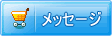
<style>
.page{position:relative;width:112px;height:36px}
.page>*{position:absolute;margin:0}
.t1{font:16px "MS-UIGothic";color:#fefefe}
</style>
<div class="page">
<p class="t1" style="left:42px;top:12px;width:59px;height:14px">メッセージ</p>
</div>
